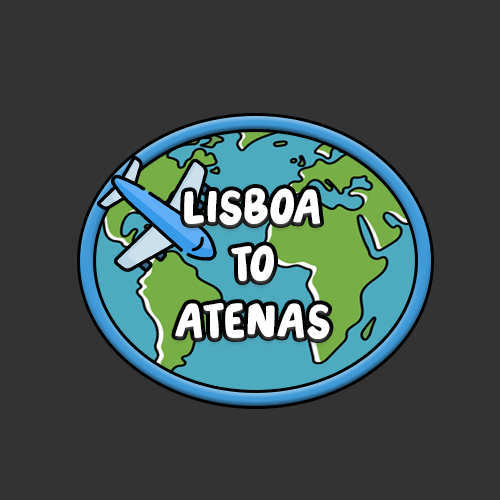
<style>
.page{position:relative;width:500px;height:500px;background:#333333}
.page>*{position:absolute;margin:0}
.t1{font:47.3px "TonightFriend-Regular";color:#ffffff}
</style>
<div class="page">
<p class="t1" style="left:175px;top:188px;width:155px;height:151px;text-align:center">Lisboa<br>to<br>Atenas</p>
</div>
